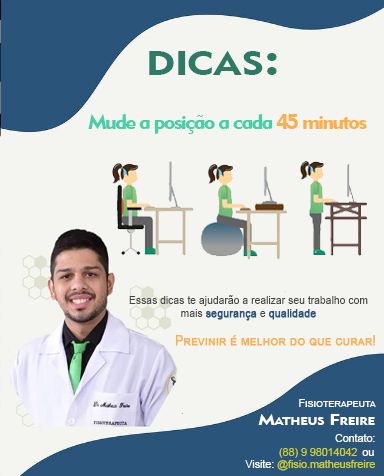
<style>
.page{position:relative;width:384px;height:476px;background:#f4f5f0}
.page>*{position:absolute;margin:0}
.t1{font:48px "Geometric415BT-BlackA";letter-spacing:-0.02em;color:#2d7a65;font-variant:small-caps;scale:1.19 1}
.t2{font:21.3px "Geometric415BT-BlackA";letter-spacing:-0.08em;color:#47cfaa}
.t3{font:21.3px "Geometric415BT-BlackA";letter-spacing:-0.08em;color:#faaf4c}
.t4{font:10.9px "ArialMT";color:#444444;scale:0.95 1}
.t5{font:10.9px "ArialMT";color:#2a547a;font-weight:bold;scale:0.95 1}
.t6{font:12.7px "ArialMT";color:#faaf4c;font-variant:small-caps;font-weight:bold;scale:0.94 1}
.t7{font:10.7px "ArialMT";color:#ffffff;font-variant:small-caps}
.t8{font:16px "Geometric415BT-BlackA";letter-spacing:-0.02em;color:#ffffff;font-variant:small-caps;scale:1.19 1}
.t9{font:10.7px "ArialMT";color:#ffffff}
.t10{font:10.7px "ArialMT";color:#ced227}
</style>
<div class="page">
<p class="t1" style="left:149px;top:51px;width:128px;height:24px">dicas:</p>
<p class="t2" style="left:88px;top:114px;width:279px;height:20px">Mude a posição a cada <span class="t3">45 minutos</span></p>
<p class="t4" style="left:129px;top:295px;width:239px;height:26px;text-align:center">Essas dicas te ajudarão a realizar seu trabalho com <br>mais <span class="t5">segurança </span>e <span class="t5">qualidade</span></p>
<p class="t6" style="left:175px;top:335px;width:200px;height:11px">Previnir é melhor do que curar!</p>
<p class="t7" style="left:299px;top:399px;width:77px;height:8px">Fisioterapeuta</p>
<p class="t8" style="left:258px;top:414px;width:117px;height:11px">Matheus Freire</p>
<p class="t9" style="left:335px;top:434px;width:40px;height:8px">Contato:</p>
<p class="t10" style="left:279px;top:448px;width:78px;height:10px">(88) 9 98014042</p>
<p class="t9" style="left:245px;top:460px;width:29px;height:8px">Visite:</p>
<p class="t10" style="left:277px;top:460px;width:98px;height:11px">@fisio.matheusfreire</p>
<p class="t9" style="left:362px;top:450px;width:12px;height:6px">ou</p>
</div>
